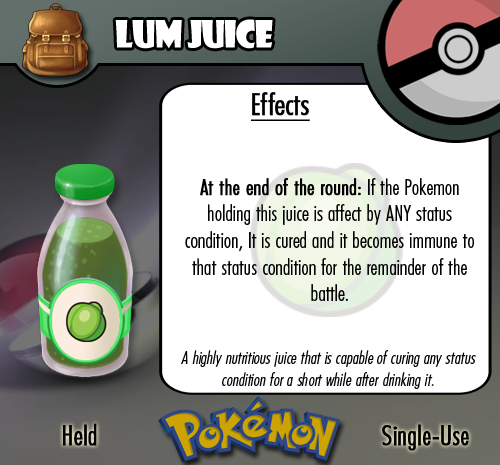
<style>
.page{position:relative;width:500px;height:465px;background:#ffffff}
.page>*{position:absolute;margin:0}
.t1{font:36.7px "ShowcardGothic-Reg";letter-spacing:-0.025em;color:#ffffff;scale:0.91 1}
.t2{font:22.2px "FuturaCondensedBQ-Light";color:#010101}
.t3{font:27.8px "FuturaCondensedBQ-Light";color:#010101;font-weight:bold}
.t4{font:30.6px "FuturaCondensedBQ-Light";color:#010101;font-weight:bold;text-decoration:underline}
.t5{font:22.2px "FuturaCondensedBQ-Light";color:#010101;font-weight:bold}
.t6{font:18.1px "FuturaCondensedBQ-Light";color:#010101;font-style:italic}
</style>
<div class="page">
<p class="t1" style="left:115px;top:19px;width:158px;height:30px">Lum Juice</p>
<p class="t2" style="left:185px;top:92px;width:289px;height:209px"><span class="t3">  </span><span class="t4">Effects<br><br><br><br></span><span class="t5">At the end of the round:</span> If the Pokemon holding this juice is affect by ANY status condition, It is cured and it becomes immune to that status condition for the remainder of the battle.</p>
<p class="t6" style="left:181px;top:350px;width:295px;height:39px;text-align:center">A highly nutritious juice that is capable of curing any status condition for a short while after drinking it.</p>
<p class="t3" style="left:63px;top:423px;width:34px;height:23px">Held</p>
<p class="t3" style="left:382px;top:424px;width:87px;height:27px">Single-Use</p>
</div>
